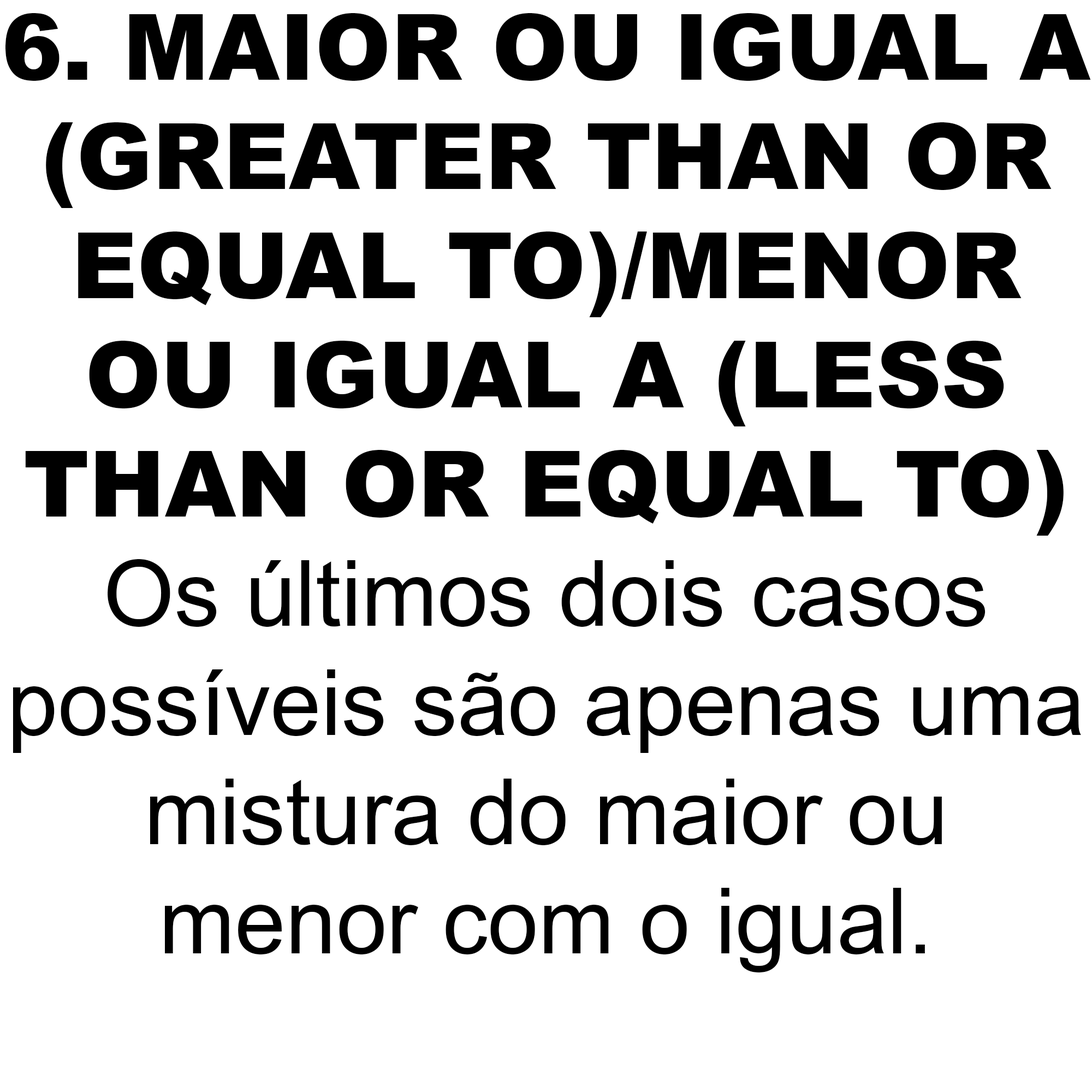
<style>
.page{position:relative;width:1092px;height:1092px;background:#ffffff}
.page>*{position:absolute;margin:0}
.t1{font:91px "Arial-Black";color:#000000}
.t2{font:91px "ArialMT";color:#000000}
</style>
<div class="page">
<p class="t1" style="left:5px;top:13px;width:1086px;height:959px;text-align:center">6. MAIOR OU IGUAL A<br>(GREATER THAN OR<br>EQUAL TO)/MENOR<br>OU IGUAL A (LESS<br>THAN OR EQUAL TO)<br><span class="t2">Os últimos dois casos<br>possíveis são apenas uma<br>mistura do maior ou<br>menor com o igual.</span></p>
</div>
